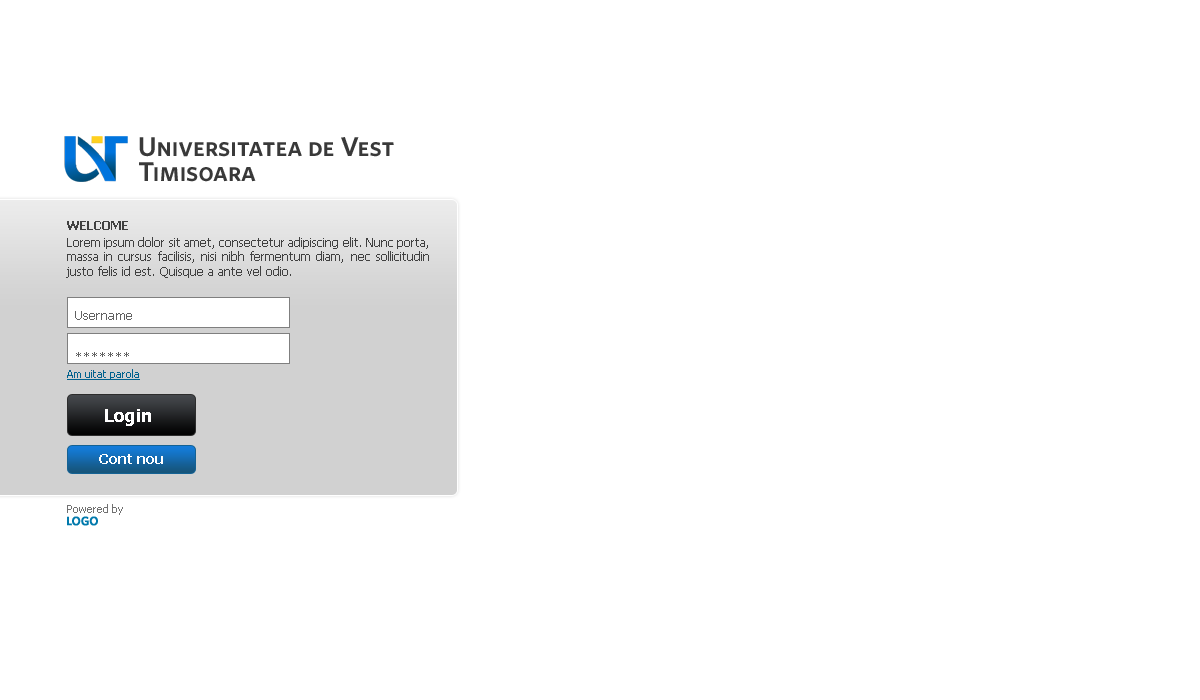
<style>
.page{position:relative;width:1200px;height:700px;background:#ffffff}
.page>*{position:absolute;margin:0}
.t1{font:12px "Tahoma";color:#404040}
.t2{font:13px "Tahoma-Bold";color:#404040;text-transform:uppercase}
.t3{font:12px/17px "Tahoma";color:#404040}
.t4{font:13px/42px "Tahoma";color:#616161}
.t5{font:11px "Tahoma";color:#02628e;text-decoration:underline}
.t6{font:18px "Tahoma-Bold";color:#ffffff}
.t7{font:14px "Tahoma-Bold";color:#ffffff}
.t8{font:11px "Tahoma";color:#717171}
</style>
<div class="page">
<p class="t1" style="left:66px;top:221px;width:363px;height:57px;text-align:justify"><span class="t2">Welcome<br></span><span class="t3">Lorem ipsum dolor sit amet, </span>consectetur adipiscing elit. Nunc porta, massa in cursus facilisis, nisi nibh fermentum diam, nec sollicitudin justo felis id est. Quisque a ante vel odio.</p>
<p class="t4" style="left:75px;top:311px;width:57px;height:46px">Username<br>*******</p>
<p class="t5" style="left:67px;top:369px;width:73px;height:11px">Am uitat parola</p>
<p class="t6" style="left:105px;top:409px;width:46px;height:17px">Login</p>
<p class="t7" style="left:99px;top:454px;width:64px;height:10px">Cont nou</p>
<p class="t8" style="left:67px;top:504px;width:56px;height:11px">Powered by</p>
</div>
